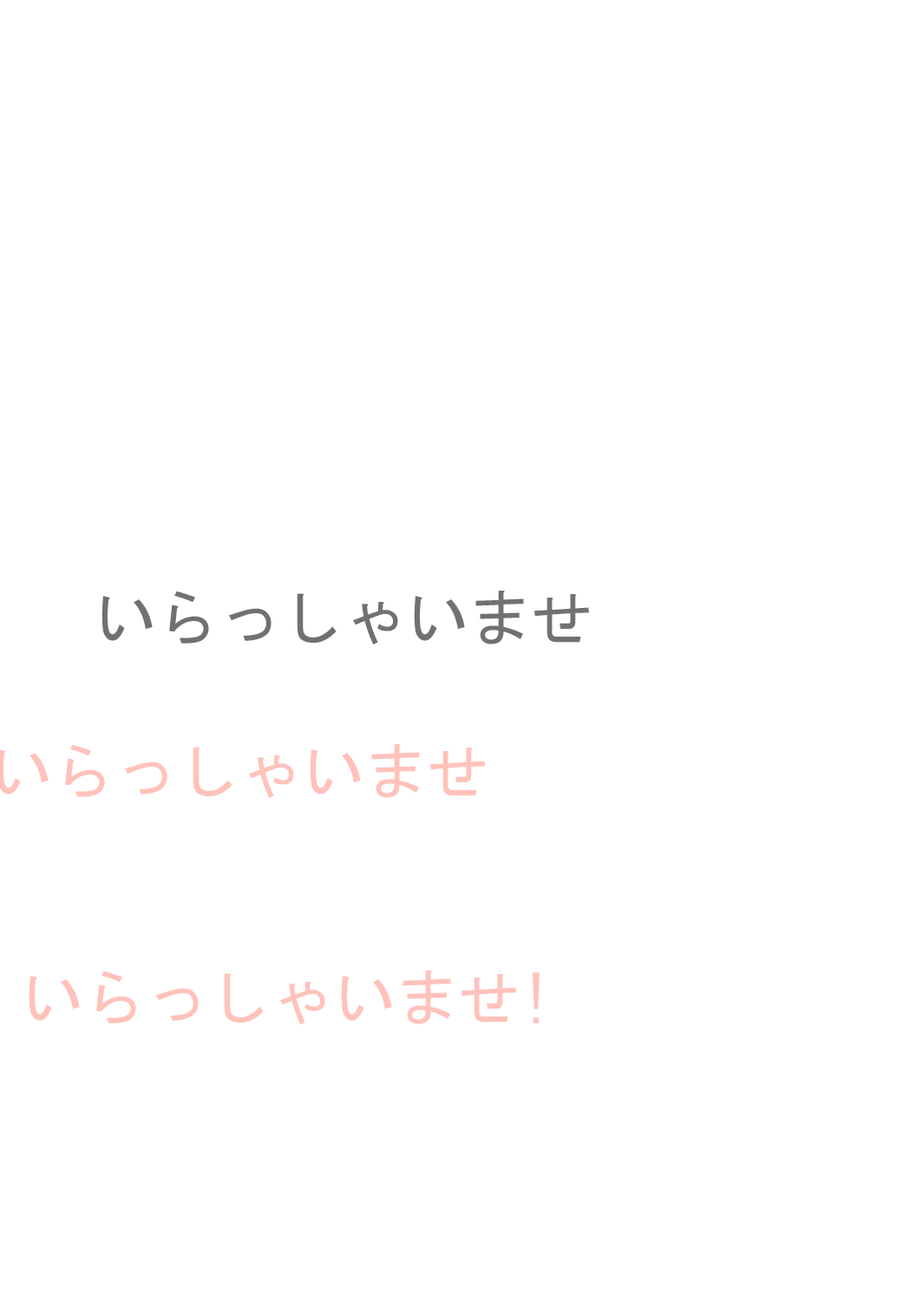
<style>
.page{position:relative;width:916px;height:1301px;background:#ffffff}
.page>*{position:absolute;margin:0}
.t1{font:62.5px "MS-Gothic";color:#717171}
.t2{font:62.5px "MS-Gothic";color:#ffc2bb}
</style>
<div class="page">
<p class="t1" style="left:102px;top:591px;width:487px;height:54px">いらっしゃいませ</p>
<p class="t2" style="left:29px;top:971px;width:511px;height:54px">いらっしゃいませ!</p>
</div>
